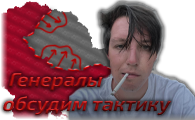
<style>
.page{position:relative;width:195px;height:120px}
.page>*{position:absolute;margin:0}
.t1{font:20.6px "Exo2-Bold";scale:0.97 1}
</style>
<div class="page">
<p class="t1" style="left:3px;top:73px;width:169px;height:43px">Генералы<br>обсудим тактику</p>
</div>
